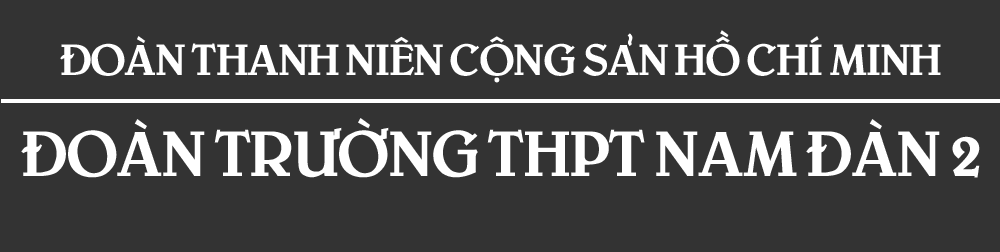
<style>
.page{position:relative;width:1000px;height:252px;background:#333333}
.page>*{position:absolute;margin:0}
.t1{font:41px "UTM-Bienvenue";color:#ffffff}
.t2{font:60px "UTM-Bienvenue";color:#ffffff}
</style>
<div class="page">
<p class="t1" style="left:60px;top:30px;width:881px;height:53px">ĐOÀN THANH NIÊN CỘNG SẢN HỒ CHÍ MINH</p>
<p class="t2" style="left:21px;top:118px;width:959px;height:60px">ĐOÀN TRƯỜNG THPT NAM ĐÀN 2</p>
</div>
